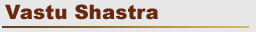
<style>
.page{position:relative;width:256px;height:32px;background:#e7e7e7}
.page>*{position:absolute;margin:0}
.t1{font:20px "Arial-Black";color:#692910}
</style>
<div class="page">
<p class="t1" style="left:5px;top:4px;width:153px;height:16px">Vastu Shastra</p>
</div>
